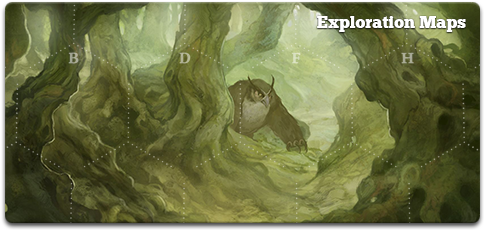
<style>
.page{position:relative;width:485px;height:230px}
.page>*{position:absolute;margin:0}
.t1{font:17px "ChunkFive";color:#ffffff}
</style>
<div class="page">
<p class="t1" style="left:317px;top:16px;width:149px;height:16px">Exploration Maps</p>
</div>
